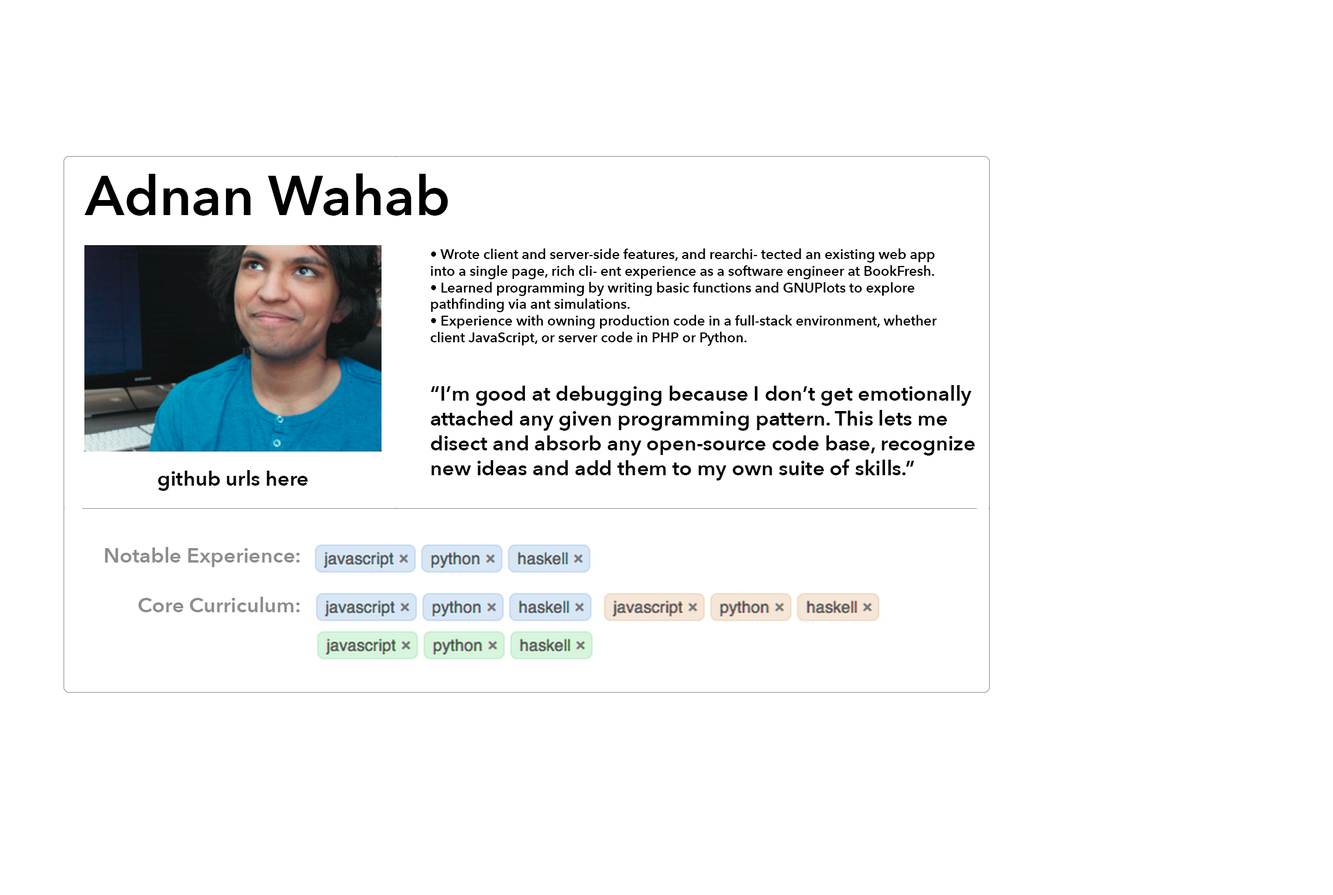
<style>
.page{position:relative;width:1333px;height:895px;background:#ffffff}
.page>*{position:absolute;margin:0}
.t1{font:55.5px "AvenirNext-DemiBold";color:#000000}
.t2{font:13.9px "AvenirNext-DemiBold";color:#000000}
.t3{font:20.8px "AvenirNext-DemiBold";color:#000000}
.t4{font:20.8px "AvenirNext-DemiBold";color:#8d8d8d}
</style>
<div class="page">
<p class="t1" style="left:84px;top:173px;width:364px;height:43px">Adnan Wahab</p>
<p class="t2" style="left:431px;top:248px;width:544px;height:232px">• Wrote client and server-side features, and rearchi- tected an existing web app <br>into a single page, rich cli- ent experience as a software engineer at BookFresh.<br>• Learned programming by writing basic functions and GNUPlots to explore <br>pathfinding via ant simulations.<br>• Experience with owning production code in a full-stack environment, whether <br>client JavaScript, or server code in PHP or Python.<br><br><br><span class="t3">“I’m good at debugging because I don’t get emotionally <br>attached any given programming pattern. This lets me <br>disect and absorb any open-source code base, recognize <br>new ideas and add them to my own suite of skills.”</span></p>
<p class="t3" style="left:158px;top:470px;width:150px;height:21px">github urls here</p>
<p class="t4" style="left:105px;top:547px;width:195px;height:65px;text-align:right">Notable Experience:<br><br>Core Curriculum:</p>
</div>
